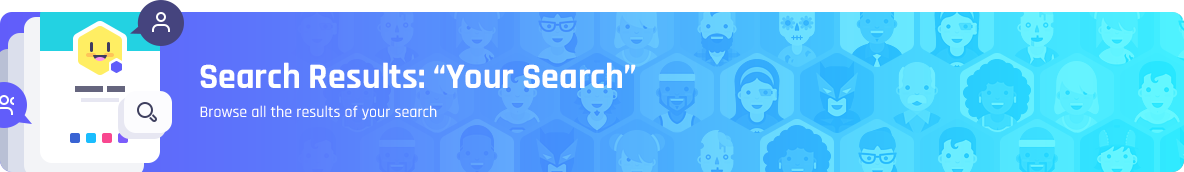
<style>
.page{position:relative;width:1184px;height:172px}
.page>*{position:absolute;margin:0}
.t1{font:36px "Rajdhani-Bold";color:#ffffff}
.t2{font:16px "Rajdhani-Medium";color:#ffffff}
</style>
<div class="page">
<p class="t1" style="left:200px;top:62px;width:436px;height:26px">Search Results: “Your Search”</p>
<p class="t2" style="left:200px;top:105px;width:237px;height:15px">Browse all the results of your search</p>
</div>
